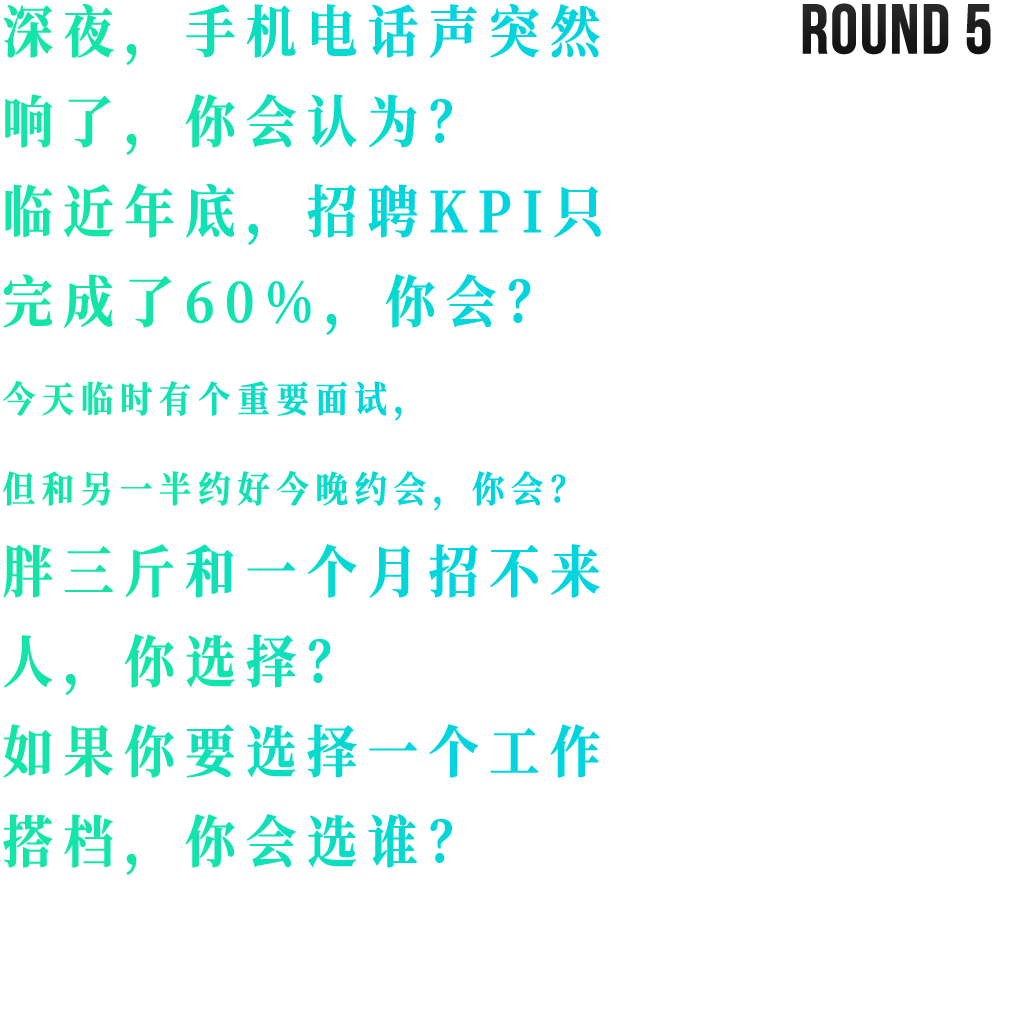
<style>
.page{position:relative;width:1024px;height:1024px;background:#ffffff}
.page>*{position:absolute;margin:0}
.t1{font:56px/90px "SourceHanSerifCN-Bold";letter-spacing:0.18em;font-weight:bold;scale:0.9 1}
.t2{font:70px "BebasNeue";color:#2f2f2f;font-weight:bold}
.t3{font:36px/90px "SourceHanSerifCN-Bold";letter-spacing:0.18em;color:#0de0bb;font-weight:bold;scale:0.9 1}
.t4{font:56px/90px "SourceHanSerifCN-Bold";letter-spacing:0.18em;color:#0de0b8;font-weight:bold;scale:0.9 1}
</style>
<div class="page">
<p class="t1" style="left:3px;top:4px;width:597px;height:151px">深夜，手机电话声突然<br>响了，你会认为？</p>
<p class="t2" style="left:802px;top:3px;width:189px;height:52px">ROUNd 5</p>
<p class="t1" style="left:3px;top:183px;width:598px;height:152px">临近年底，招聘KPI只<br>完成了60%，你会？</p>
<p class="t3" style="left:2px;top:381px;width:564px;height:130px">今天临时有个重要面试，<br>但和另一半约好今晚约会，你会？</p>
<p class="t1" style="left:3px;top:544px;width:597px;height:151px">胖三斤和一个月招不来<br>人，你选择？</p>
<p class="t4" style="left:3px;top:724px;width:597px;height:151px">如果你要选择一个工作<br>搭档，你会选谁？</p>
</div>
